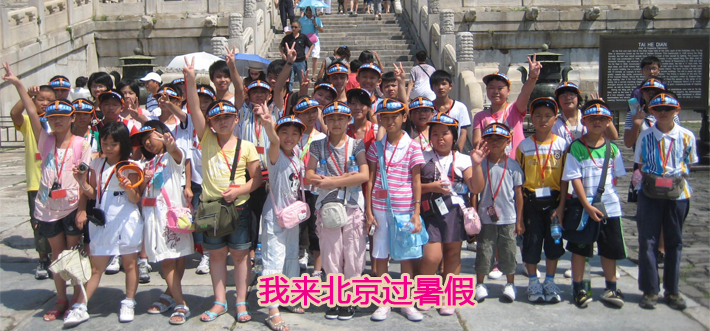
<style>
.page{position:relative;width:710px;height:331px}
.page>*{position:absolute;margin:0}
.t1{font:30px "MicrosoftYaHei";color:#f00089;font-weight:bold}
</style>
<div class="page">
<p class="t1" style="left:259px;top:276px;width:216px;height:30px">我来北京过暑假</p>
</div>
